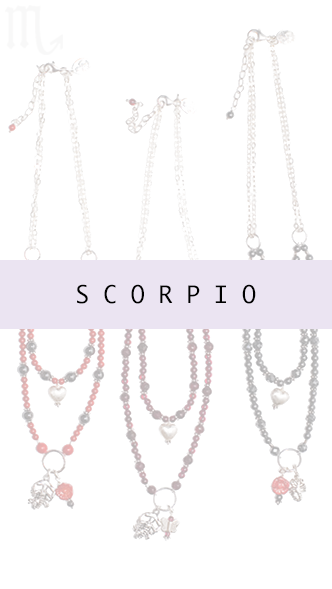
<style>
.page{position:relative;width:332px;height:589px;background:#ffffff}
.page>*{position:absolute;margin:0}
.t1{font:23.3px "Ayuthaya";color:#000000}
</style>
<div class="page">
<p class="t1" style="left:77px;top:284px;width:179px;height:20px">S C O R P I O</p>
</div>
